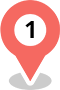
<style>
.page{position:relative;width:60px;height:90px;background:#ffffff}
.page>*{position:absolute;margin:0}
.t1{font:24px "OpenSans-Bold";letter-spacing:-0.05em;color:#000000}
</style>
<div class="page">
<p class="t1" style="left:25px;top:21px;width:9px;height:17px">1</p>
</div>
